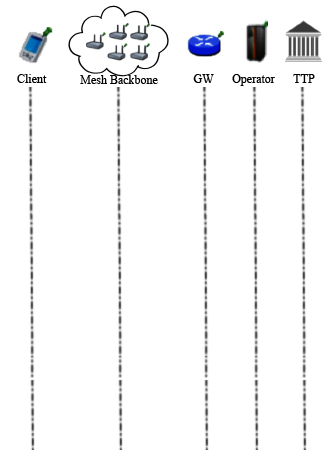
<style>
.page{position:relative;width:325px;height:450px;background:#ffffff}
.page>*{position:absolute;margin:0}
.t1{font:12px "TimesNewRomanPSMT";color:#000000}
</style>
<div class="page">
<p class="t1" style="left:17px;top:74px;width:30px;height:9px">Client</p>
<p class="t1" style="left:80px;top:75px;width:78px;height:9px">Mesh Backbone</p>
<p class="t1" style="left:193px;top:74px;width:21px;height:9px">GW</p>
<p class="t1" style="left:232px;top:74px;width:43px;height:12px">Operator</p>
<p class="t1" style="left:293px;top:74px;width:22px;height:9px">TTP</p>
</div>
